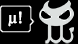
<style>
.page{position:relative;width:78px;height:44px;background:#000000}
.page>*{position:absolute;margin:0}
.t1{font:16.7px "STZhongsong";color:#ffffff;font-weight:bold}
</style>
<div class="page">
<p class="t1" style="left:8px;top:11px;width:14px;height:16px">μ!</p>
</div>
